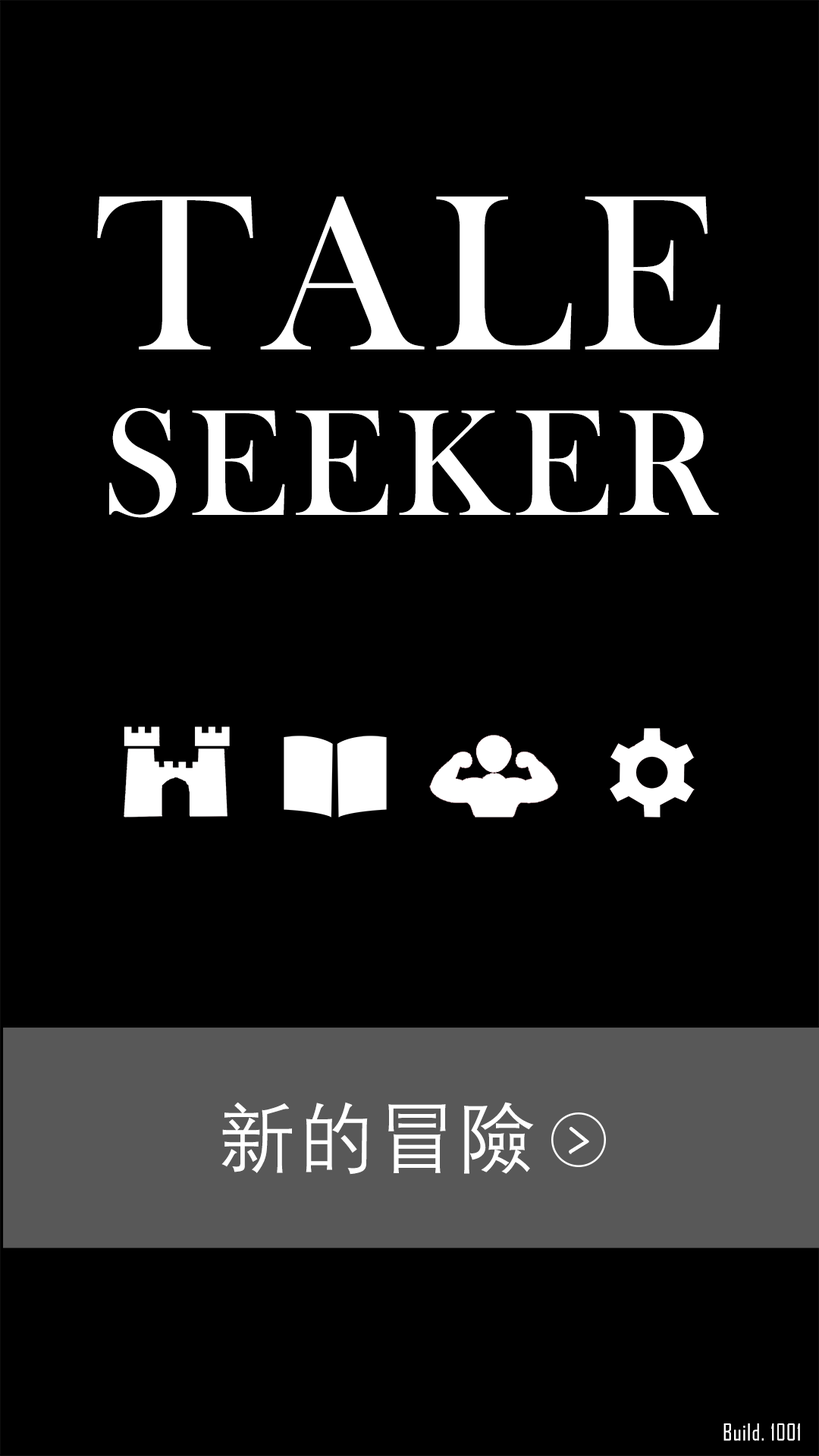
<style>
.page{position:relative;width:819px;height:1456px;background:#000000}
.page>*{position:absolute;margin:0}
.t1{font:156.2px/190.4px "BaskOldFace";letter-spacing:0.04em;color:#ffffff;text-transform:uppercase}
.t2{font:229px/226.2px "BaskOldFace";letter-spacing:0.04em;color:#ffffff;text-transform:uppercase}
.t3{font:76.8px "DengXian-Regular";letter-spacing:0.04em;color:#ffffff}
.t4{font:21.9px "AgencyFB-Reg";letter-spacing:0.04em;color:#ffffff}
</style>
<div class="page">
<p class="t1" style="left:97px;top:196px;width:623px;height:322px;text-align:center"><span class="t2">TALE<br></span>SEEKER</p>
<p class="t3" style="left:221px;top:1102px;width:313px;height:73px">新的冒險</p>
<p class="t4" style="left:723px;top:1423px;width:77px;height:18px">Build. 1001</p>
</div>
